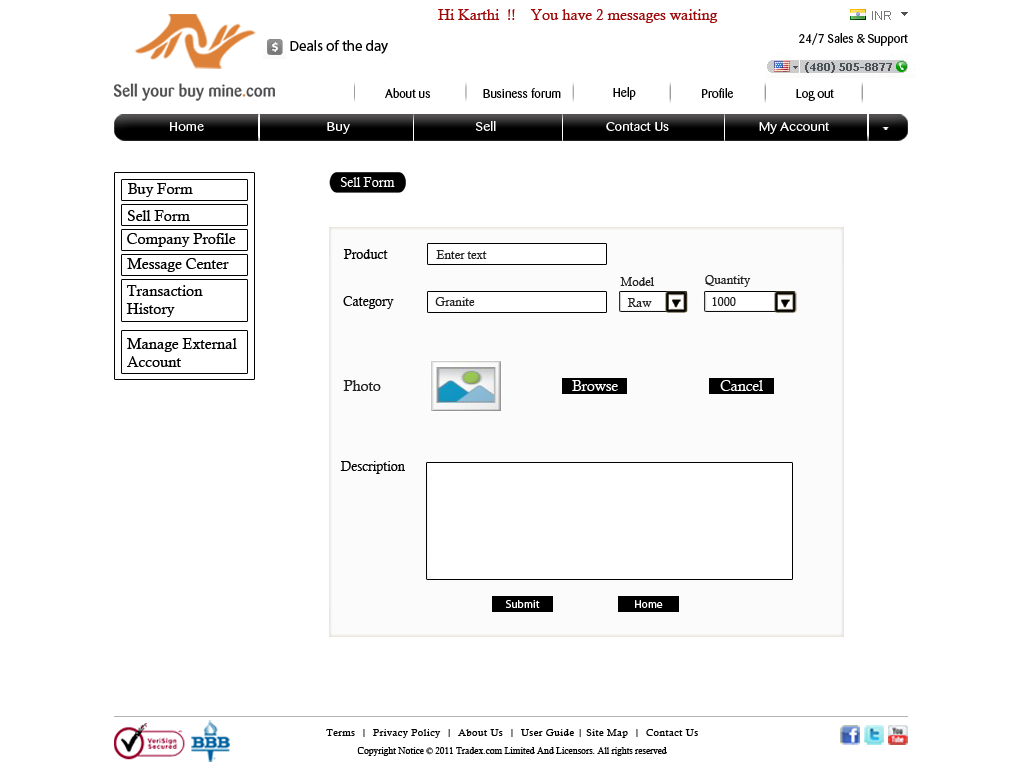
<style>
.page{position:relative;width:1024px;height:768px;background:#ffffff}
.page>*{position:absolute;margin:0}
.t1{font:15px "CalistoMT";color:#9e0909}
.t2{font:14.9px "MyriadPro-Regular";color:#000000}
.t3{font:12px "Barmeno-Regular";color:#030303;scale:1.05 1}
.t4{font:12px "Barmeno-Regular";color:#000000;scale:1.05 1}
.t5{font:12.1px "Barmeno-Regular";color:#ffffff;scale:1.2 1}
.t6{font:15px "CalistoMT";color:#000000}
.t7{font:13px "CalistoMT";color:#ffffff}
.t8{font:13px "CalistoMT";color:#010101}
.t9{font:12px "CalistoMT";color:#222222}
.t10{font:12px "CalistoMT";color:#252525}
.t11{font:14.6px "CalistoMT";color:#222222}
.t12{font:14.6px "CalistoMT";color:#ffffff}
.t13{font:11px "MyriadPro-Regular";color:#ffffff}
.t14{font:10px/18px "CalistoMT";letter-spacing:0.045em;color:#000000}
.t15{font:9px/18px "CalistoMT";color:#000000}
</style>
<div class="page">
<p class="t1" style="left:438px;top:9px;width:280px;height:14px">Hi Karthi  !!    You have 2 messages waiting</p>
<p class="t2" style="left:290px;top:40px;width:98px;height:14px">Deals of the day</p>
<p class="t3" style="left:799px;top:33px;width:109px;height:13px">24/7 Sales &amp; Support</p>
<p class="t4" style="left:385px;top:88px;width:45px;height:10px">About us</p>
<p class="t4" style="left:483px;top:88px;width:78px;height:10px">Business forum</p>
<p class="t4" style="left:613px;top:87px;width:23px;height:13px">Help</p>
<p class="t4" style="left:702px;top:88px;width:31px;height:10px">Profile</p>
<p class="t4" style="left:796px;top:89px;width:38px;height:12px">Log out</p>
<p class="t5" style="left:170px;top:121px;width:660px;height:13px">Home                                     Buy                                      Sell                                 Contact Us                           My Account</p>
<p class="t6" style="left:128px;top:183px;width:65px;height:14px">Buy Form</p>
<p class="t7" style="left:340px;top:177px;width:55px;height:10px">Sell Form</p>
<p class="t6" style="left:128px;top:210px;width:62px;height:11px">Sell Form</p>
<p class="t6" style="left:127px;top:233px;width:109px;height:14px">Company Profile</p>
<p class="t8" style="left:343px;top:249px;width:45px;height:10px">Product</p>
<p class="t9" style="left:436px;top:250px;width:51px;height:9px">Enter text</p>
<p class="t6" style="left:127px;top:258px;width:102px;height:14px">Message Center</p>
<p class="t9" style="left:620px;top:277px;width:34px;height:9px">Model</p>
<p class="t9" style="left:705px;top:275px;width:46px;height:12px">Quantity</p>
<p class="t6" style="left:126px;top:285px;width:77px;height:32px">Transaction<br>History</p>
<p class="t8" style="left:343px;top:296px;width:51px;height:13px">Category</p>
<p class="t9" style="left:435px;top:297px;width:40px;height:9px">Granite</p>
<p class="t10" style="left:627px;top:298px;width:25px;height:9px">Raw</p>
<p class="t9" style="left:712px;top:297px;width:24px;height:9px">1000</p>
<p class="t6" style="left:127px;top:338px;width:110px;height:29px">Manage External<br>Account</p>
<p class="t11" style="left:343px;top:380px;width:38px;height:11px">Photo</p>
<p class="t12" style="left:572px;top:380px;width:46px;height:11px">Browse</p>
<p class="t12" style="left:720px;top:380px;width:43px;height:11px">Cancel</p>
<p class="t8" style="left:340px;top:461px;width:65px;height:13px">Description</p>
<p class="t13" style="left:505px;top:600px;width:35px;height:8px">Submit</p>
<p class="t13" style="left:635px;top:600px;width:28px;height:8px">Home</p>
<p class="t14" style="left:326px;top:729px;width:372px;height:27px;text-align:center">Terms  |  Privacy Policy  |  About Us  |  User Guide | Site Map  |  Contact Us<br><span class="t15">Copyright Notice © 2011 Tradex.com Limited And Licensors. All rights reserved</span></p>
</div>
